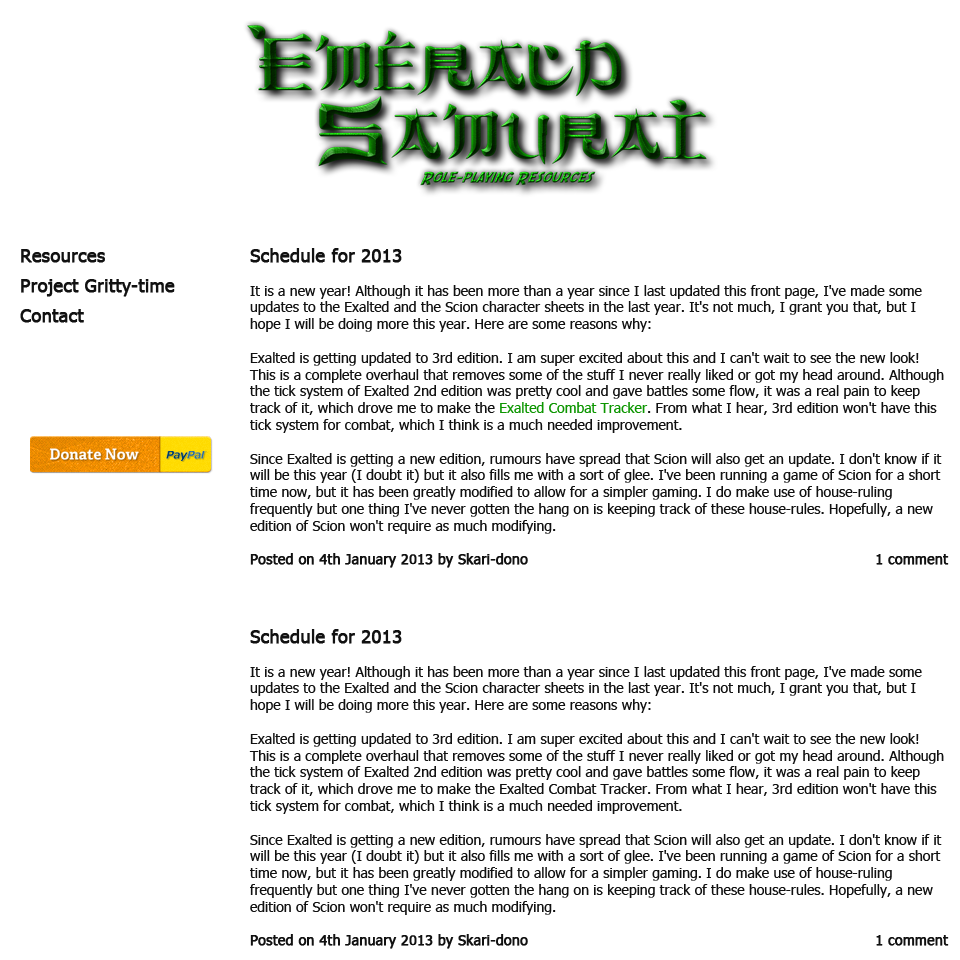
<style>
.page{position:relative;width:960px;height:960px;background:#ffffff}
.page>*{position:absolute;margin:0}
.t1{font:18px/30px "Tahoma";color:#111111;font-weight:bold}
.t2{font:14px "Tahoma";color:#111111}
.t3{font:18px "Tahoma";color:#111111;font-weight:bold}
.t4{font:14px "Tahoma";color:#0d9601}
.t5{font:14px "Tahoma";color:#111111;font-weight:bold}
.t6{font:15px "AdelleBasic-Bold";color:#ffffff}
</style>
<div class="page">
<p class="t1" style="left:20px;top:249px;width:155px;height:74px">Resources<br>Project Gritty-time<br>Contact</p>
<p class="t2" style="left:249px;top:248px;width:700px;height:320px"><span class="t3">Schedule for 2013<br></span><br>It is a new year! Although it has been more than a year since I last updated this front page, I've made some updates to the Exalted and the Scion character sheets in the last year. It's not much, I grant you that, but I hope I will be doing more this year. Here are some reasons why:<br><br>Exalted is getting updated to 3rd edition. I am super excited about this and I can't wait to see the new look! This is a complete overhaul that removes some of the stuff I never really liked or got my head around. Although the tick system of Exalted 2nd edition was pretty cool and gave battles some flow, it was a real pain to keep track of it, which drove me to make the <span class="t4">Exalted Combat Tracker</span>. From what I hear, 3rd edition won't have this tick system for combat, which I think is a much needed improvement.<br><br>Since Exalted is getting a new edition, rumours have spread that Scion will also get an update. I don't know if it will be this year (I doubt it) but it also fills me with a sort of glee. I've been running a game of Scion for a short time now, but it has been greatly modified to allow for a simpler gaming. I do make use of house-ruling frequently but one thing I've never gotten the hang on is keeping track of these house-rules. Hopefully, a new edition of Scion won't require as much modifying.<br><br><span class="t5">Posted on 4th January 2013 by Skari-dono 1 comment</span></p>
<p class="t6" style="left:50px;top:448px;width:89px;height:12px">Donate Now</p>
<p class="t2" style="left:249px;top:629px;width:700px;height:320px"><span class="t3">Schedule for 2013<br></span><br>It is a new year! Although it has been more than a year since I last updated this front page, I've made some updates to the Exalted and the Scion character sheets in the last year. It's not much, I grant you that, but I hope I will be doing more this year. Here are some reasons why:<br><br>Exalted is getting updated to 3rd edition. I am super excited about this and I can't wait to see the new look! This is a complete overhaul that removes some of the stuff I never really liked or got my head around. Although the tick system of Exalted 2nd edition was pretty cool and gave battles some flow, it was a real pain to keep track of it, which drove me to make the Exalted Combat Tracker. From what I hear, 3rd edition won't have this tick system for combat, which I think is a much needed improvement.<br><br>Since Exalted is getting a new edition, rumours have spread that Scion will also get an update. I don't know if it will be this year (I doubt it) but it also fills me with a sort of glee. I've been running a game of Scion for a short time now, but it has been greatly modified to allow for a simpler gaming. I do make use of house-ruling frequently but one thing I've never gotten the hang on is keeping track of these house-rules. Hopefully, a new edition of Scion won't require as much modifying.<br><br><span class="t5">Posted on 4th January 2013 by Skari-dono 1 comment</span></p>
</div>
